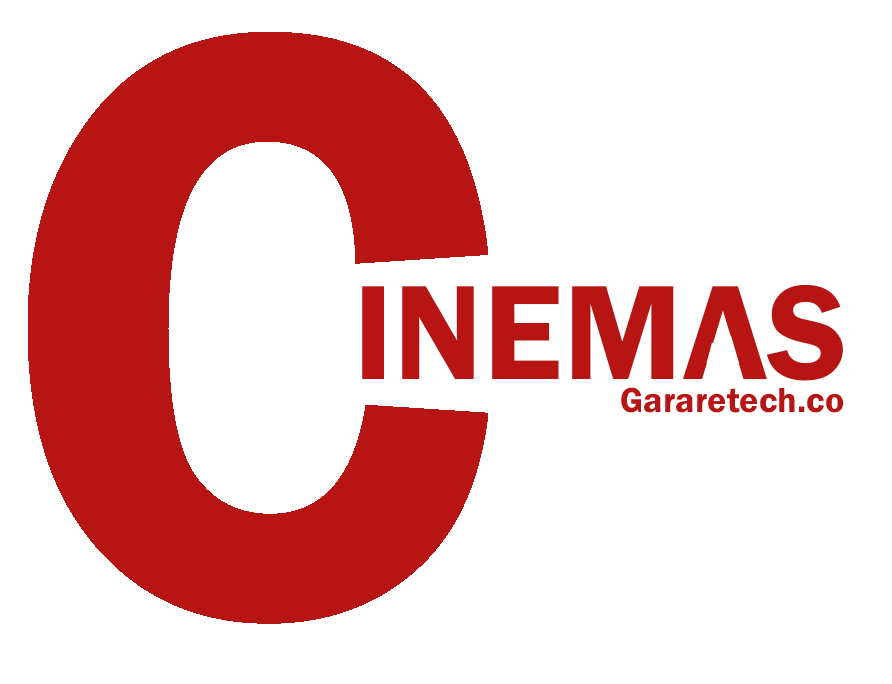
<style>
.page{position:relative;width:892px;height:684px;background:#ffffff}
.page>*{position:absolute;margin:0}
.t1{font:856.9px "FranklinGothic-Demi";color:#b71414;scale:0.94 1}
.t2{font:36px "FranklinGothic-Demi";color:#b71414}
</style>
<div class="page">
<p class="t1" style="left:28px;top:32px;width:460px;height:592px">C</p>
<p class="t2" style="left:621px;top:387px;width:223px;height:26px">Gararetech.co</p>
</div>
